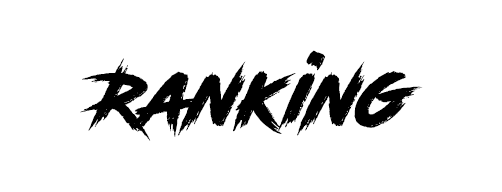
<style>
.page{position:relative;width:502px;height:192px;background:#ffffff}
.page>*{position:absolute;margin:0}
.t1{font:75px "RoadRage";color:#000000}
</style>
<div class="page">
<p class="t1" style="left:80px;top:50px;width:343px;height:91px">Ranking</p>
</div>
